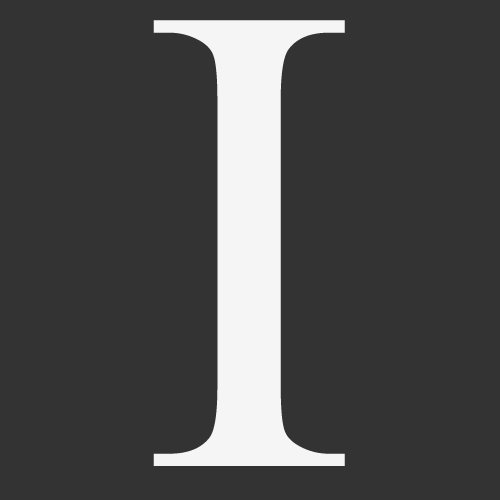
<style>
.page{position:relative;width:500px;height:500px;background:#333333}
.page>*{position:absolute;margin:0}
.t1{font:672.9px "TimesNewRomanPSMT";letter-spacing:0.04em;color:#f5f5f5}
</style>
<div class="page">
<p class="t1" style="left:153px;top:20px;width:192px;height:446px">I</p>
</div>
